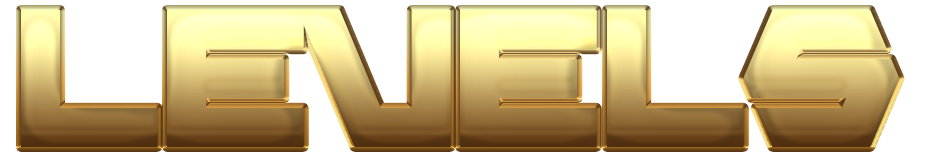
<style>
.page{position:relative;width:929px;height:156px;background:#ffffff}
.page>*{position:absolute;margin:0}
.t1{font:200px "Diagon"}
</style>
<div class="page">
<p class="t1" style="left:21px;top:10px;width:879px;height:137px">LEVELS</p>
</div>
